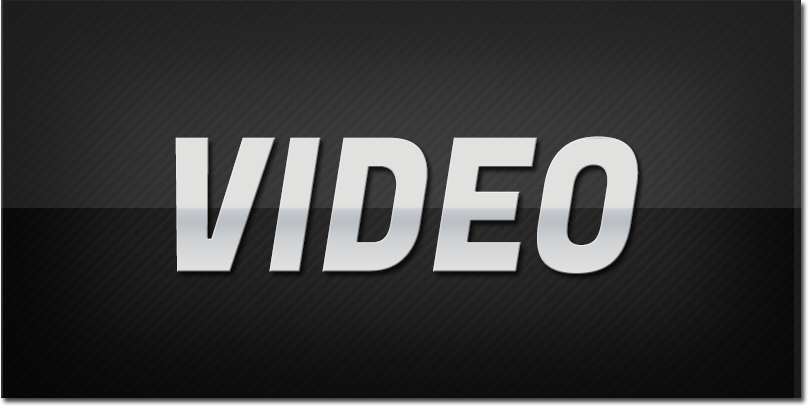
<style>
.page{position:relative;width:808px;height:406px}
.page>*{position:absolute;margin:0}
.t1{font:185.2px "FugazOne-Regular";color:#dfdfdf;scale:0.89 1}
</style>
<div class="page">
<p class="t1" style="left:175px;top:136px;width:464px;height:138px">VIDEO</p>
</div>
